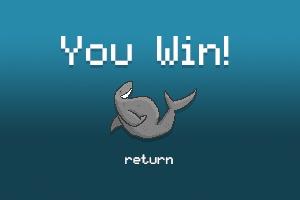
<style>
.page{position:relative;width:300px;height:200px}
.page>*{position:absolute;margin:0}
.t1{font:33.3px "pixelmix";color:#ffffff}
.t2{font:10.9px "pixelmix";color:#ffffff}
</style>
<div class="page">
<p class="t1" style="left:61px;top:36px;width:168px;height:29px">You Win!</p>
<p class="t2" style="left:125px;top:154px;width:48px;height:10px">return</p>
</div>
